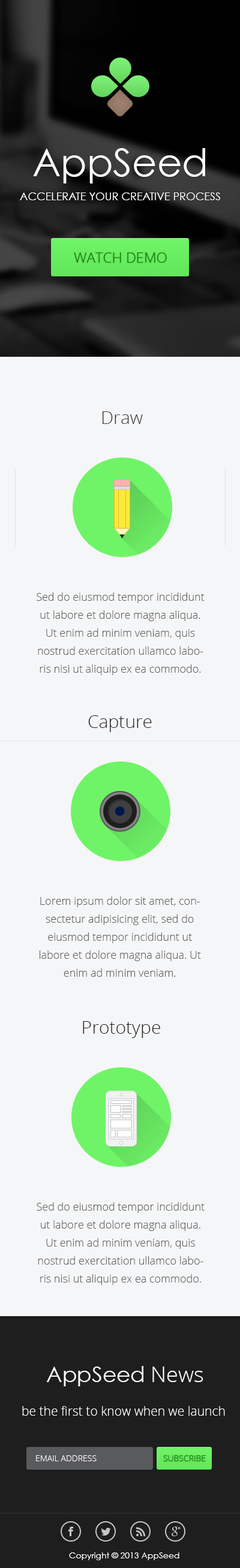
<style>
.page{position:relative;width:240px;height:1568px;background:#f5f6f7}
.page>*{position:absolute;margin:0}
.t1{font:10.8px/24px "CenturyGothic";color:#ffffff}
.t2{font:38.4px/24px "CenturyGothic";color:#ffffff}
.t3{font:14.4px "OpenSans-Light";color:#158403}
.t4{font:18px "OpenSans-Light";color:#3b3b3b}
.t5{font:10.8px/18px "OpenSans-Light";color:#5c5c5c}
.t6{font:18px "OpenSans-Light";color:#1e1e1e}
.t7{font:21.6px "CenturyGothic";color:#ffffff}
.t8{font:21.6px "OpenSans-Light";color:#ffffff}
.t9{font:12.6px "OpenSans-Light";color:#ffffff}
.t10{font:8.4px "OpenSans-Light";color:#ffffff}
.t11{font:8.4px "OpenSans-Light";color:#158403}
.t12{font:8.4px "CenturyGothic";color:#ffffff}
</style>
<div class="page">
<p class="t1" style="left:20px;top:148px;width:200px;height:52px;text-align:center"><span class="t2">AppSeed<br></span>ACCELERATE YOUR CREATIVE PROCESS</p>
<p class="t3" style="left:74px;top:252px;width:93px;height:11px">WATCH DEMO</p>
<p class="t4" style="left:102px;top:411px;width:41px;height:13px">Draw</p>
<p class="t5" style="left:37px;top:592px;width:167px;height:83px;text-align:center">Sed do eiusmod tempor incididunt ut labore et dolore magna aliqua. Ut enim ad minim veniam, quis nostrud exercitation ullamco laboris nisi ut aliquip ex ea commodo.</p>
<p class="t6" style="left:88px;top:715px;width:64px;height:17px">Capture</p>
<p class="t5" style="left:40px;top:896px;width:161px;height:81px;text-align:center">Lorem ipsum dolor sit amet, consectetur adipisicing elit, sed do eiusmod tempor incididunt ut labore et dolore magna aliqua. Ut enim ad minim veniam.</p>
<p class="t6" style="left:83px;top:1021px;width:77px;height:17px">Prototype</p>
<p class="t5" style="left:37px;top:1202px;width:167px;height:83px;text-align:center">Sed do eiusmod tempor incididunt ut labore et dolore magna aliqua. Ut enim ad minim veniam, quis nostrud exercitation ullamco laboris nisi ut aliquip ex ea commodo.</p>
<p class="t7" style="left:46px;top:1366px;width:157px;height:20px">AppSeed <span class="t8">News</span></p>
<p class="t9" style="left:22px;top:1406px;width:203px;height:10px">be the first to know when we launch</p>
<p class="t10" style="left:36px;top:1455px;width:61px;height:6px">EMAIL ADDRESS</p>
<p class="t11" style="left:163px;top:1455px;width:43px;height:6px">SUBSCRIBE</p>
<p class="t12" style="left:69px;top:1552px;width:110px;height:8px">Copyright © 2013 AppSeed</p>
</div>
